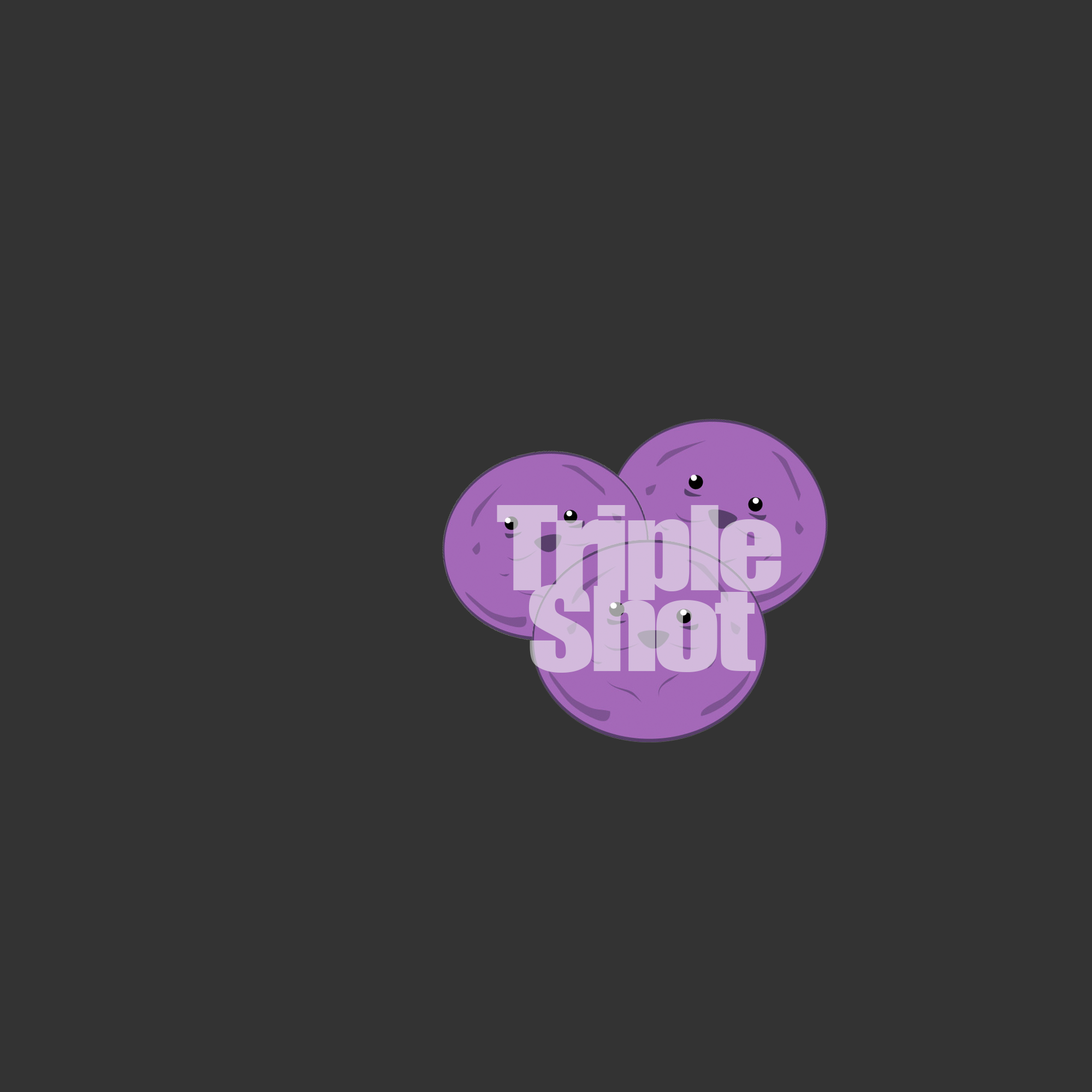
<style>
.page{position:relative;width:1092px;height:1092px;background:#333333}
.page>*{position:absolute;margin:0}
.t1{font:107.7px/80.7px "Impact";letter-spacing:-0.05em;color:#d3badc;scale:1.25 1}
</style>
<div class="page">
<p class="t1" style="left:497px;top:505px;width:284px;height:168px;text-align:center">Triple<br>Shot</p>
</div>
